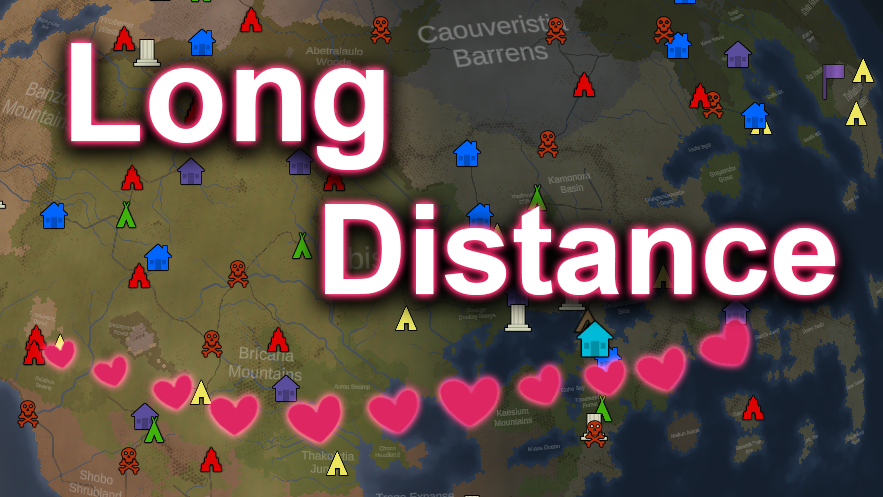
<style>
.page{position:relative;width:883px;height:497px}
.page>*{position:absolute;margin:0}
.t1{font:135.7px "Arial-BoldMT";color:#ffffff}
.t2{font:125.9px "Arial-BoldMT";color:#ffffff}
</style>
<div class="page">
<p class="t1" style="left:71px;top:43px;width:313px;height:127px">Long</p>
<p class="t2" style="left:325px;top:204px;width:511px;height:91px">Distance</p>
</div>
